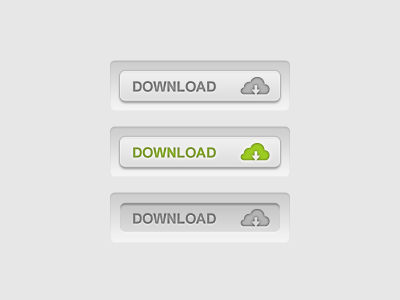
<style>
.page{position:relative;width:400px;height:300px;background:#e7e7e7}
.page>*{position:absolute;margin:0}
.t1{font:14px "Arial-BoldMT";color:#6c6c6c}
.t2{font:14px "Arial-BoldMT";color:#709218}
</style>
<div class="page">
<p class="t1" style="left:133px;top:81px;width:83px;height:11px">DOWNLOAD</p>
<p class="t2" style="left:133px;top:147px;width:83px;height:11px">DOWNLOAD</p>
<p class="t1" style="left:133px;top:213px;width:83px;height:11px">DOWNLOAD</p>
</div>
